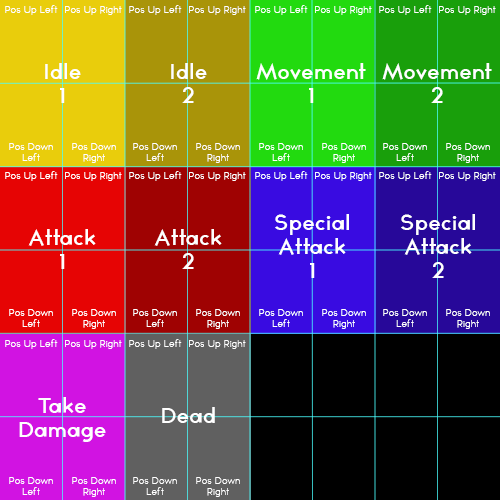
<style>
.page{position:relative;width:500px;height:500px}
.page>*{position:absolute;margin:0}
.t1{font:9px "TYPOGRAPHPRO-Light";color:#ffffff}
.t2{font:20px "TYPOGRAPHPRO-SemiBold";color:#ffffff}
</style>
<div class="page">
<p class="t1" style="left:5px;top:5px;width:53px;height:10px">Pos Up Left</p>
<p class="t1" style="left:65px;top:6px;width:57px;height:9px">Pos Up Right</p>
<p class="t1" style="left:129px;top:5px;width:53px;height:10px">Pos Up Left</p>
<p class="t1" style="left:189px;top:6px;width:57px;height:9px">Pos Up Right</p>
<p class="t1" style="left:255px;top:5px;width:53px;height:10px">Pos Up Left</p>
<p class="t1" style="left:315px;top:6px;width:57px;height:9px">Pos Up Right</p>
<p class="t1" style="left:379px;top:5px;width:53px;height:10px">Pos Up Left</p>
<p class="t1" style="left:439px;top:6px;width:57px;height:9px">Pos Up Right</p>
<p class="t2" style="left:45px;top:63px;width:36px;height:40px;text-align:center">Idle<br>1</p>
<p class="t2" style="left:171px;top:63px;width:36px;height:40px;text-align:center">Idle<br>2</p>
<p class="t2" style="left:256px;top:63px;width:110px;height:40px;text-align:center">Movement<br>1</p>
<p class="t2" style="left:382px;top:63px;width:110px;height:40px;text-align:center">Movement<br>2</p>
<p class="t1" style="left:9px;top:143px;width:44px;height:18px;text-align:center">Pos Down<br>Left</p>
<p class="t1" style="left:72px;top:143px;width:44px;height:20px;text-align:center">Pos Down<br>Right</p>
<p class="t1" style="left:133px;top:143px;width:44px;height:18px;text-align:center">Pos Down<br>Left</p>
<p class="t1" style="left:196px;top:143px;width:44px;height:20px;text-align:center">Pos Down<br>Right</p>
<p class="t1" style="left:259px;top:143px;width:44px;height:18px;text-align:center">Pos Down<br>Left</p>
<p class="t1" style="left:322px;top:143px;width:44px;height:20px;text-align:center">Pos Down<br>Right</p>
<p class="t1" style="left:383px;top:143px;width:44px;height:18px;text-align:center">Pos Down<br>Left</p>
<p class="t1" style="left:446px;top:143px;width:44px;height:20px;text-align:center">Pos Down<br>Right</p>
<p class="t1" style="left:5px;top:171px;width:53px;height:10px">Pos Up Left</p>
<p class="t1" style="left:65px;top:172px;width:57px;height:9px">Pos Up Right</p>
<p class="t1" style="left:129px;top:171px;width:53px;height:10px">Pos Up Left</p>
<p class="t1" style="left:189px;top:172px;width:57px;height:9px">Pos Up Right</p>
<p class="t1" style="left:255px;top:171px;width:53px;height:10px">Pos Up Left</p>
<p class="t1" style="left:315px;top:172px;width:57px;height:9px">Pos Up Right</p>
<p class="t1" style="left:379px;top:171px;width:53px;height:10px">Pos Up Left</p>
<p class="t1" style="left:439px;top:172px;width:57px;height:9px">Pos Up Right</p>
<p class="t2" style="left:275px;top:214px;width:74px;height:64px;text-align:center">Special<br>Attack<br>1</p>
<p class="t2" style="left:401px;top:214px;width:74px;height:64px;text-align:center">Special<br>Attack<br>2</p>
<p class="t2" style="left:28px;top:229px;width:68px;height:40px;text-align:center">Attack<br>1</p>
<p class="t2" style="left:154px;top:229px;width:68px;height:40px;text-align:center">Attack<br>2</p>
<p class="t1" style="left:9px;top:309px;width:44px;height:18px;text-align:center">Pos Down<br>Left</p>
<p class="t1" style="left:72px;top:309px;width:44px;height:20px;text-align:center">Pos Down<br>Right</p>
<p class="t1" style="left:133px;top:309px;width:44px;height:18px;text-align:center">Pos Down<br>Left</p>
<p class="t1" style="left:196px;top:309px;width:44px;height:20px;text-align:center">Pos Down<br>Right</p>
<p class="t1" style="left:259px;top:309px;width:44px;height:18px;text-align:center">Pos Down<br>Left</p>
<p class="t1" style="left:322px;top:309px;width:44px;height:20px;text-align:center">Pos Down<br>Right</p>
<p class="t1" style="left:383px;top:309px;width:44px;height:18px;text-align:center">Pos Down<br>Left</p>
<p class="t1" style="left:446px;top:309px;width:44px;height:20px;text-align:center">Pos Down<br>Right</p>
<p class="t1" style="left:5px;top:339px;width:53px;height:10px">Pos Up Left</p>
<p class="t1" style="left:65px;top:340px;width:57px;height:9px">Pos Up Right</p>
<p class="t1" style="left:129px;top:339px;width:53px;height:10px">Pos Up Left</p>
<p class="t1" style="left:189px;top:340px;width:57px;height:9px">Pos Up Right</p>
<p class="t2" style="left:19px;top:397px;width:87px;height:45px;text-align:center">Take<br>Damage</p>
<p class="t2" style="left:162px;top:407px;width:53px;height:16px">Dead</p>
<p class="t1" style="left:9px;top:477px;width:44px;height:18px;text-align:center">Pos Down<br>Left</p>
<p class="t1" style="left:72px;top:477px;width:44px;height:20px;text-align:center">Pos Down<br>Right</p>
<p class="t1" style="left:133px;top:477px;width:44px;height:18px;text-align:center">Pos Down<br>Left</p>
<p class="t1" style="left:196px;top:477px;width:44px;height:20px;text-align:center">Pos Down<br>Right</p>
</div>
